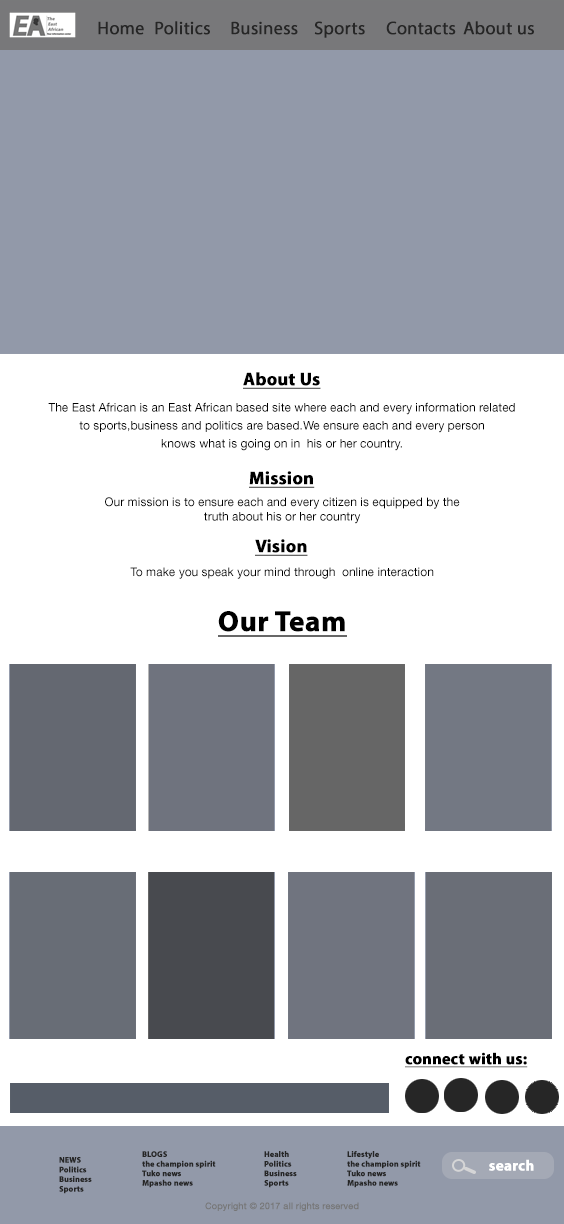
<style>
.page{position:relative;width:564px;height:1224px;background:#ffffff}
.page>*{position:absolute;margin:0}
.t1{font:18px "MyriadPro-Regular";color:#262626;font-weight:bold}
.t2{font:18px "MyriadPro-Bold";color:#000000;font-weight:bold;text-decoration:underline}
.t3{font:12px/18px "HelveticaNeueLTStd-Roman";color:#000000}
.t4{font:12px "HelveticaNeueLTStd-Roman";color:#000000}
.t5{font:29px "MyriadPro-Bold";color:#000000;font-weight:bold;text-decoration:underline}
.t6{font:16px "MyriadPro-Bold";color:#000000;font-weight:bold;text-decoration:underline}
.t7{font:8px "MyriadPro-Bold";color:#262626;font-weight:bold}
.t8{font:15px "MyriadPro-Bold";color:#ffffff;font-weight:bold}
.t9{font:9px "HelveticaNeueLTStd-Roman";color:#767676;font-weight:bold}
</style>
<div class="page">
<p class="t1" style="left:98px;top:21px;width:46px;height:14px">Home</p>
<p class="t1" style="left:155px;top:21px;width:55px;height:14px">Politics</p>
<p class="t1" style="left:231px;top:21px;width:67px;height:14px">Business</p>
<p class="t1" style="left:314px;top:21px;width:51px;height:17px">Sports</p>
<p class="t1" style="left:386px;top:21px;width:70px;height:14px">Contacts</p>
<p class="t1" style="left:463px;top:21px;width:71px;height:14px">About us</p>
<p class="t2" style="left:243px;top:372px;width:78px;height:17px">About Us</p>
<p class="t3" style="left:48px;top:402px;width:467px;height:49px;text-align:center">The East African is an East African based site where each and every information related<br>to sports,business and politics are based.We ensure each and every person<br>knows what is going on in  his or her country.</p>
<p class="t2" style="left:249px;top:471px;width:66px;height:17px">Mission</p>
<p class="t4" style="left:105px;top:497px;width:355px;height:27px;text-align:center">Our mission is to ensure each and every citizen is equipped by the<br>truth about his or her country</p>
<p class="t2" style="left:255px;top:539px;width:53px;height:17px">Vision</p>
<p class="t4" style="left:130px;top:567px;width:304px;height:12px">To make you speak your mind through  online interaction</p>
<p class="t5" style="left:218px;top:611px;width:129px;height:26px">Our Team</p>
<p class="t6" style="left:405px;top:1052px;width:123px;height:16px">connect with us:</p>
<p class="t7" style="left:59px;top:1157px;width:33px;height:37px">NEWS <br>Politics Business <br>Sports</p>
<p class="t7" style="left:142px;top:1151px;width:74px;height:37px">BLOGS<br>the champion spirit<br>Tuko news<br>Mpasho news</p>
<p class="t7" style="left:264px;top:1151px;width:33px;height:37px">Health<br>Politics Business <br>Sports</p>
<p class="t7" style="left:347px;top:1151px;width:74px;height:37px">Lifestyle<br>the champion spirit<br>Tuko news<br>Mpasho news</p>
<p class="t8" style="left:489px;top:1159px;width:45px;height:12px">search</p>
<p class="t9" style="left:205px;top:1202px;width:154px;height:9px">Copyright © 2017 all rights reserved</p>
</div>
